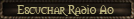
<style>
.page{position:relative;width:134px;height:19px}
.page>*{position:absolute;margin:0}
.t1{font:12px "Morpheus";color:#b9b27c}
</style>
<div class="page">
<p class="t1" style="left:17px;top:5px;width:97px;height:11px">Escuchar Radio Ao</p>
</div>
